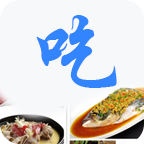
<style>
.page{position:relative;width:144px;height:144px;background:#f7f8fa}
.page>*{position:absolute;margin:0}
.t1{font:91.7px "STXingkai-SC-Bold";letter-spacing:-0.025em;color:#3385ff}
</style>
<div class="page">
<p class="t1" style="left:36px;top:15px;width:81px;height:73px">吃</p>
</div>
